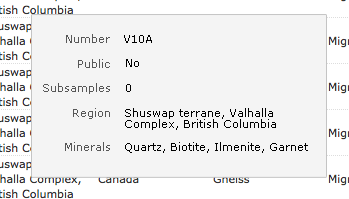
<style>
.page{position:relative;width:349px;height:199px;background:#f4f4f4}
.page>*{position:absolute;margin:0}
.t1{font:11px "Verdana";color:#575757}
.t2{font:11px "Verdana";color:#000000}
.t3{font:11px/11px "Verdana";color:#000000}
</style>
<div class="page">
<p class="t1" style="left:66px;top:34px;width:44px;height:9px">Number</p>
<p class="t2" style="left:124px;top:35px;width:28px;height:8px">V10A</p>
<p class="t1" style="left:78px;top:59px;width:32px;height:9px">Public</p>
<p class="t2" style="left:126px;top:59px;width:13px;height:8px">No</p>
<p class="t1" style="left:43px;top:83px;width:67px;height:11px">Subsamples</p>
<p class="t2" style="left:126px;top:84px;width:5px;height:8px">0</p>
<p class="t1" style="left:73px;top:108px;width:37px;height:11px">Region</p>
<p class="t3" style="left:125px;top:108px;width:151px;height:22px">Shuswap terrane, Valhalla<br>Complex, British Columbia</p>
<p class="t1" style="left:65px;top:142px;width:45px;height:9px">Minerals</p>
<p class="t2" style="left:125px;top:142px;width:183px;height:11px">Quartz, Biotite, Ilmenite, Garnet</p>
</div>
